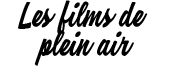
<style>
.page{position:relative;width:170px;height:66px;background:#ffffff}
.page>*{position:absolute;margin:0}
.t1{font:23.9px "RipmonstersPersonalUse";color:#000000}
</style>
<div class="page">
<p class="t1" style="left:17px;top:0px;width:131px;height:66px;text-align:center">Les films de <br>plein air</p>
</div>
